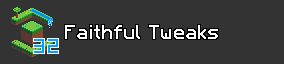
<style>
.page{position:relative;width:284px;height:64px;background:#333333}
.page>*{position:absolute;margin:0}
.t1{font:24px "ComplianceSans";color:#ffffff}
</style>
<div class="page">
<p class="t1" style="left:65px;top:25px;width:153px;height:14px">Faithful Tweaks</p>
</div>
